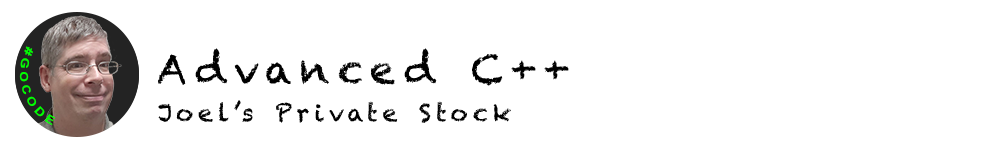
<style>
.page{position:relative;width:1000px;height:150px;background:#ffffff}
.page>*{position:absolute;margin:0}
.t1{font:11.2px "Arial-BoldMT";letter-spacing:0.2em;color:#00ff00}
.t2{font:40px "Chalkduster";letter-spacing:0.2em;color:#000000}
.t3{font:24px "Chalkduster";letter-spacing:0.2em;color:#000000}
</style>
<div class="page">
<p class="t1" style="left:19px;top:46px;width:37px;height:80px;rotate:72deg">#GOCODE</p>
<p class="t2" style="left:158px;top:48px;width:411px;height:38px">Advanced C++</p>
<p class="t3" style="left:158px;top:100px;width:353px;height:23px">Joel’s Private Stock</p>
</div>
